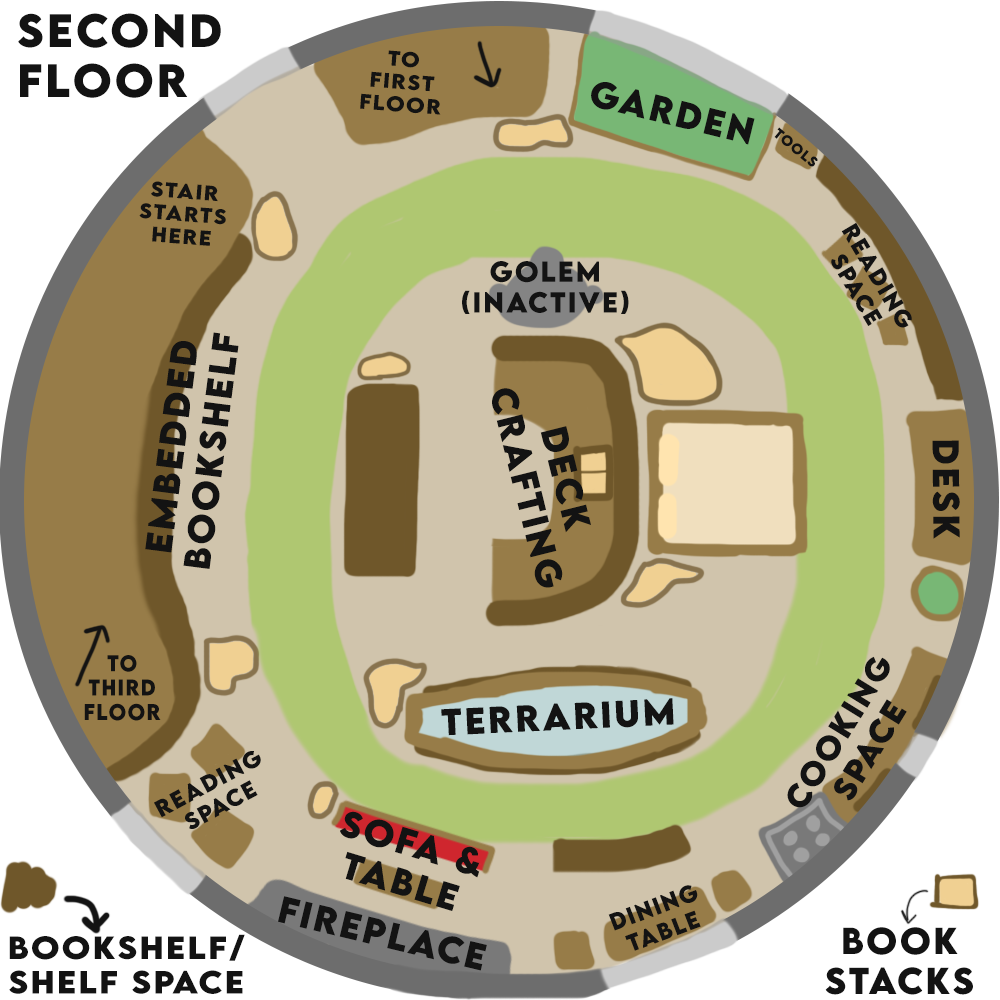
<style>
.page{position:relative;width:1000px;height:1000px}
.page>*{position:absolute;margin:0}
.t1{font:41.7px "LEMONMILK-Bold";letter-spacing:0.075em;color:#131313}
.t2{font:18.9px "LEMONMILK-Bold";letter-spacing:0.075em;color:#131313;scale:1.06 1}
.t3{font:33.3px "LEMONMILK-Bold";letter-spacing:0.075em;color:#131313}
.t4{font:13px "LEMONMILK-Bold";letter-spacing:0.075em;color:#131313}
.t5{font:21.2px "LEMONMILK-Bold";letter-spacing:0.075em;color:#131313}
.t6{font:25.6px "LEMONMILK-Bold";letter-spacing:0.075em;color:#131313}
.t7{font:20.3px "LEMONMILK-Bold";letter-spacing:0.075em;color:#131313;scale:0.93 1}
.t8{font:29.7px "LEMONMILK-Bold";letter-spacing:0.075em;color:#131313}
.t9{font:21.7px "LEMONMILK-Bold";letter-spacing:0.075em;color:#131313;scale:0.97 1}
.t10{font:28.6px "LEMONMILK-Bold";letter-spacing:0.075em;color:#131313;scale:1.07 1}
</style>
<div class="page">
<p class="t1" style="left:18px;top:13px;width:203px;height:85px">second<br>floor</p>
<p class="t2" style="left:360px;top:50px;width:81px;height:65px;text-align:center;rotate:4deg">to<br>first<br>floor</p>
<p class="t3" style="left:591px;top:82px;width:164px;height:63px;rotate:14deg">garden</p>
<p class="t4" style="left:774px;top:127px;width:44px;height:40px;rotate:39deg">tools</p>
<p class="t2" style="left:139px;top:181px;width:87px;height:65px;text-align:center;rotate:4deg">stair<br>starts<br>here</p>
<p class="t5" style="left:831px;top:222px;width:81px;height:106px;text-align:center;rotate:59deg">reading<br>space</p>
<p class="t6" style="left:462px;top:261px;width:167px;height:53px;text-align:center">golem<br>(inactive)</p>
<p class="t3" style="left:145px;top:332px;width:94px;height:237px;text-align:center;rotate:-83deg">embedded <br>bookshelf</p>
<p class="t3" style="left:492px;top:388px;width:99px;height:200px;text-align:center;rotate:76deg">deck<br>crafting</p>
<p class="t3" style="left:932px;top:440px;width:28px;height:99px;rotate:90deg">desk</p>
<p class="t7" style="left:84px;top:655px;width:77px;height:66px;text-align:center">to <br>third floor</p>
<p class="t8" style="left:787px;top:656px;width:120px;height:152px;text-align:center;rotate:-58deg">cooking<br>space</p>
<p class="t3" style="left:441px;top:698px;width:233px;height:38px;rotate:-3deg">terrarium</p>
<p class="t5" style="left:154px;top:751px;width:107px;height:78px;text-align:center;rotate:-28deg">reading<br>space</p>
<p class="t3" style="left:340px;top:811px;width:140px;height:100px;text-align:center;rotate:17deg">sofa &amp;<br>table</p>
<p class="t9" style="left:608px;top:885px;width:93px;height:66px;text-align:center;rotate:-20deg">dining<br>table</p>
<p class="t3" style="left:278px;top:896px;width:209px;height:75px;rotate:13deg">fireplace</p>
<p class="t3" style="left:825px;top:927px;width:148px;height:68px;text-align:center">book<br>stacks</p>
<p class="t10" style="left:9px;top:934px;width:236px;height:60px;text-align:center">bookshelf/<br>shelf space</p>
</div>
